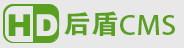
<style>
.page{position:relative;width:184px;height:48px;background:#e8e8e8}
.page>*{position:absolute;margin:0}
.t1{font:30.6px "Arial-Black";color:#e8e8e8}
.t2{font:26.2px "AdobeHeitiStd-Regular";color:#5aa020;scale:1.07 1}
.t3{font:26.2px "FZDHTJW--GB1-0";color:#5aa020;scale:1.07 1}
</style>
<div class="page">
<p class="t1" style="left:36px;top:14px;width:22px;height:22px">D</p>
<p class="t2" style="left:64px;top:11px;width:111px;height:25px"><span class="t3">后盾</span>CMS</p>
</div>
